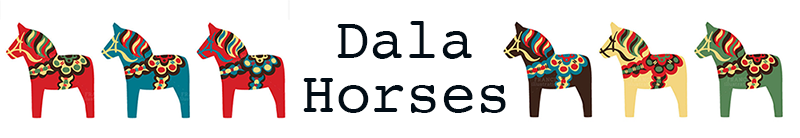
<style>
.page{position:relative;width:800px;height:138px;background:#ffffff}
.page>*{position:absolute;margin:0}
.t1{font:58.2px "Courier";color:#020d16}
</style>
<div class="page">
<p class="t1" style="left:337px;top:21px;width:135px;height:38px">Dala</p>
<p class="t1" style="left:303px;top:78px;width:203px;height:35px">Horses</p>
</div>
